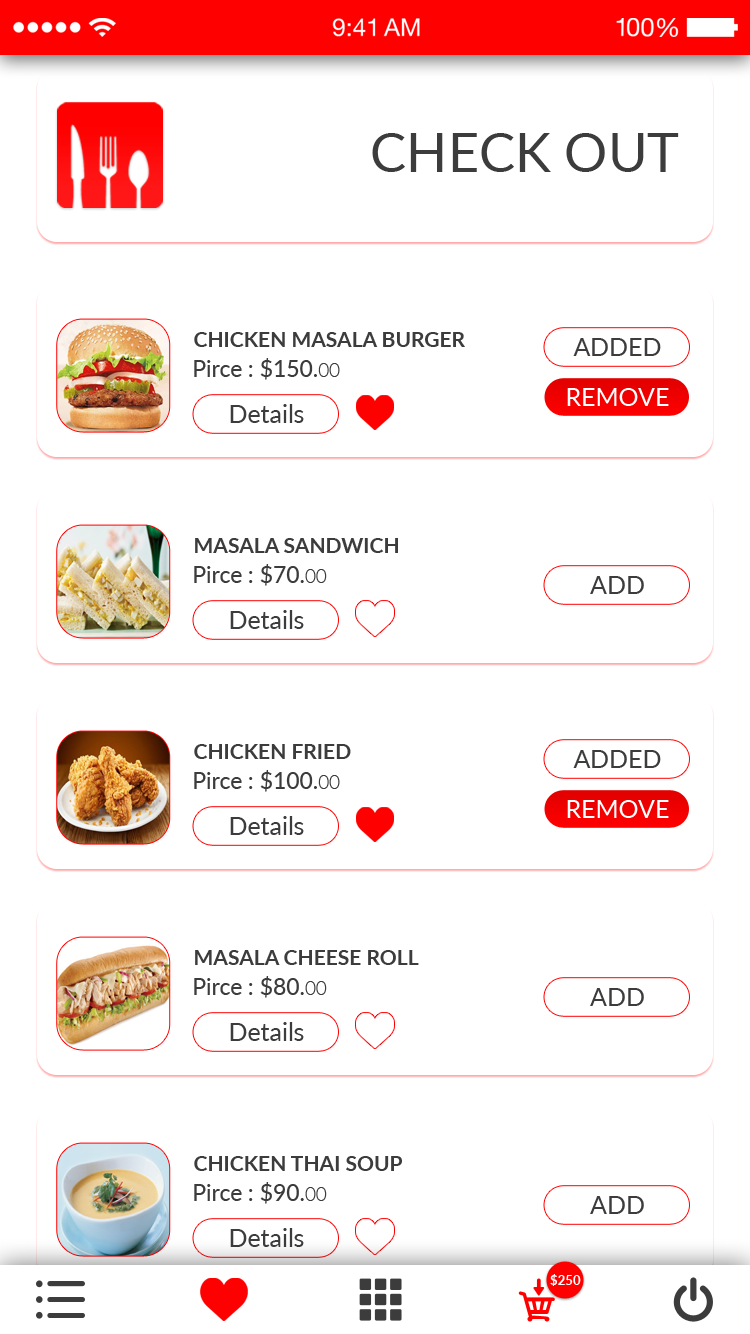
<style>
.page{position:relative;width:750px;height:1334px;background:#ffffff}
.page>*{position:absolute;margin:0}
.t1{font:54px "Lato-Regular";color:#3c3c3c}
.t2{font:21px "Lato-Bold";color:#3c3c3c;text-transform:uppercase}
.t3{font:25px "Lato-Regular";color:#3c3c3c}
.t4{font:22.9px "Lato-Regular";color:#3c3c3c}
.t5{font:22.9px "Lato-Medium";color:#3c3c3c}
.t6{font:18.6px "Lato-Light";color:#3c3c3c}
.t7{font:25px "Lato-Regular";color:#ffffff}
.t8{font:13.1px "Lato-Bold";color:#ffffff}
</style>
<div class="page">
<p class="t1" style="left:372px;top:133px;width:307px;height:39px">CHECK OUT</p>
<p class="t2" style="left:194px;top:332px;width:271px;height:15px">Chicken Masala Burger</p>
<p class="t3" style="left:573px;top:338px;width:88px;height:18px">ADDED</p>
<p class="t4" style="left:194px;top:358px;width:146px;height:22px">Pirce : <span class="t5">$150.</span><span class="t6">00</span></p>
<p class="t7" style="left:567px;top:388px;width:102px;height:18px">REMOVE</p>
<p class="t3" style="left:230px;top:404px;width:74px;height:19px">Details</p>
<p class="t2" style="left:195px;top:538px;width:203px;height:15px">Masala sandwich</p>
<p class="t4" style="left:194px;top:564px;width:133px;height:22px">Pirce : <span class="t5">$70.</span><span class="t6">00</span></p>
<p class="t3" style="left:590px;top:576px;width:54px;height:18px">ADD</p>
<p class="t3" style="left:230px;top:610px;width:74px;height:19px">Details</p>
<p class="t2" style="left:194px;top:744px;width:157px;height:15px">chicken fried</p>
<p class="t3" style="left:573px;top:750px;width:88px;height:18px">ADDED</p>
<p class="t4" style="left:194px;top:770px;width:146px;height:22px">Pirce : <span class="t5">$100.</span><span class="t6">00</span></p>
<p class="t7" style="left:567px;top:800px;width:102px;height:18px">REMOVE</p>
<p class="t3" style="left:230px;top:816px;width:74px;height:19px">Details</p>
<p class="t2" style="left:195px;top:950px;width:224px;height:15px">masala cheese ROLL</p>
<p class="t4" style="left:194px;top:976px;width:133px;height:22px">Pirce : <span class="t5">$80.</span><span class="t6">00</span></p>
<p class="t3" style="left:590px;top:988px;width:54px;height:18px">ADD</p>
<p class="t3" style="left:230px;top:1022px;width:74px;height:19px">Details</p>
<p class="t2" style="left:194px;top:1156px;width:208px;height:15px">Chicken THAI SOUP</p>
<p class="t4" style="left:194px;top:1182px;width:133px;height:22px">Pirce : <span class="t5">$90.</span><span class="t6">00</span></p>
<p class="t3" style="left:590px;top:1196px;width:54px;height:18px">ADD</p>
<p class="t3" style="left:230px;top:1228px;width:74px;height:19px">Details</p>
<p class="t8" style="left:550px;top:1274px;width:31px;height:12px">$250</p>
</div>
